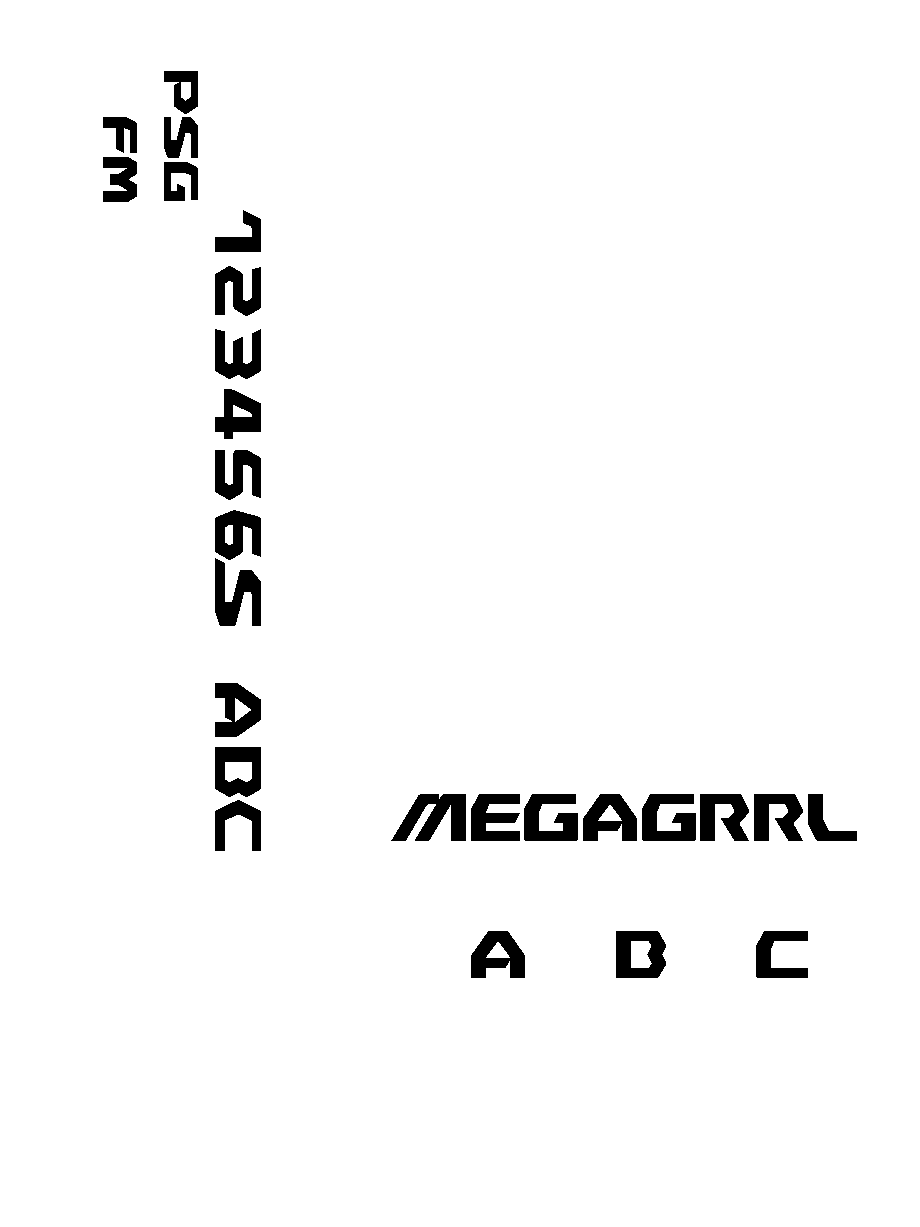
<style>
.page{position:relative;width:920px;height:1227px;background:#ffffff}
.page>*{position:absolute;margin:0}
.t1{font:45.8px "NiseMegaDrive";color:#000000}
.t2{font:62.5px "NiseMegaDrive";color:#000000}
</style>
<div class="page">
<p class="t1" style="left:164px;top:71px;width:34px;height:130px;rotate:90deg">psG</p>
<p class="t1" style="left:103px;top:117px;width:34px;height:85px;rotate:90deg">f$</p>
<p class="t2" style="left:215px;top:210px;width:46px;height:42px;rotate:90deg">1</p>
<p class="t2" style="left:215px;top:266px;width:46px;height:50px;rotate:90deg">2</p>
<p class="t2" style="left:215px;top:329px;width:46px;height:50px;rotate:90deg">3</p>
<p class="t2" style="left:215px;top:389px;width:46px;height:50px;rotate:90deg">4</p>
<p class="t2" style="left:215px;top:450px;width:46px;height:50px;rotate:90deg">5</p>
<p class="t2" style="left:215px;top:510px;width:46px;height:50px;rotate:90deg">6</p>
<p class="t2" style="left:215px;top:558px;width:46px;height:68px;rotate:90deg">S</p>
<p class="t2" style="left:215px;top:683px;width:46px;height:54px;rotate:90deg">#</p>
<p class="t2" style="left:215px;top:747px;width:46px;height:50px;rotate:90deg">b</p>
<p class="t2" style="left:391px;top:794px;width:466px;height:47px">Meg#grrl</p>
<p class="t2" style="left:215px;top:800px;width:46px;height:51px;rotate:90deg">C</p>
<p class="t2" style="left:471px;top:931px;width:54px;height:47px">#</p>
<p class="t2" style="left:616px;top:931px;width:50px;height:47px">b</p>
<p class="t2" style="left:756px;top:931px;width:52px;height:47px">c</p>
</div>
